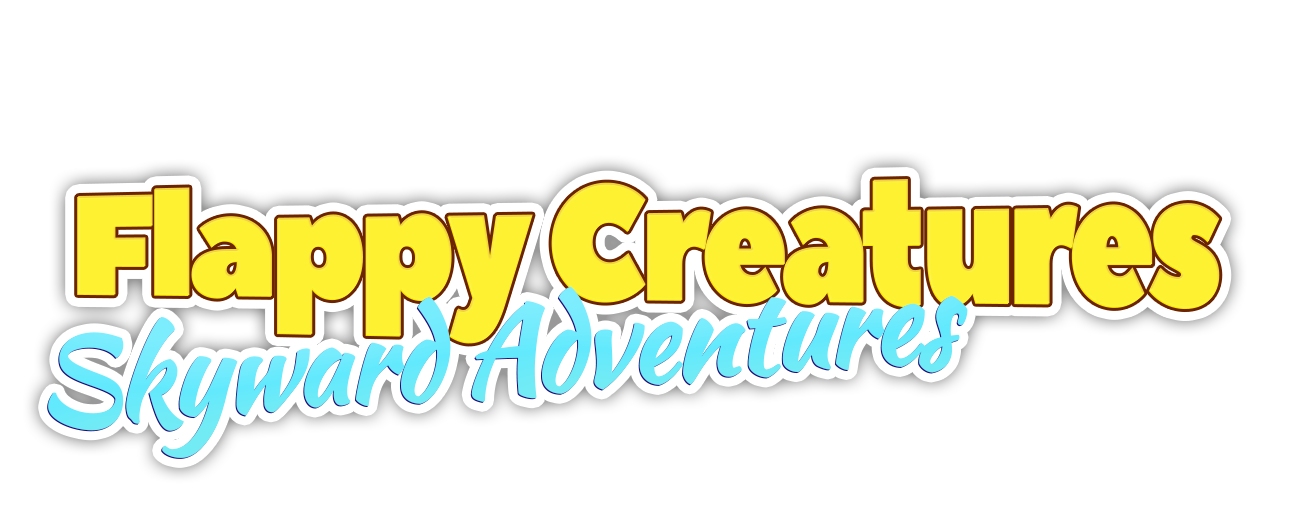
<style>
.page{position:relative;width:1299px;height:512px;background:#ffffff}
.page>*{position:absolute;margin:0}
.t1{font:164.3px "PeaceSans";letter-spacing:-0.05em;color:#fff332;scale:0.87 1}
.t2{font:116.7px "KaushanScript-Regular";letter-spacing:-0.05em;color:#62e9fd;font-weight:bold}
</style>
<div class="page">
<p class="t1" style="left:78px;top:179px;width:1142px;height:164px">Flappy Creatures</p>
<p class="t2" style="left:48px;top:286px;width:920px;height:172px;rotate:-4deg">Skyward Adventures</p>
</div>
